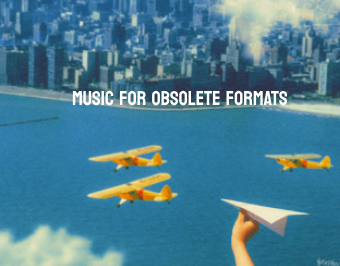
<style>
.page{position:relative;width:340px;height:266px}
.page>*{position:absolute;margin:0}
.t1{font:20px "Koulen-Regular";color:#ffffff}
</style>
<div class="page">
<p class="t1" style="left:72px;top:90px;width:216px;height:16px">MUSIC FOR OBSOLETE FORMATS</p>
</div>
